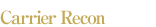
<style>
.page{position:relative;width:156px;height:27px;background:#ffffff}
.page>*{position:absolute;margin:0}
.t1{font:18px "RyuminPro-ExBold";letter-spacing:-0.08em;color:#c4a956}
</style>
<div class="page">
<p class="t1" style="left:0px;top:10px;width:106px;height:15px">Carrier Recon</p>
</div>
